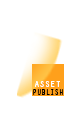
<style>
.page{position:relative;width:64px;height:128px;background:#ffffff}
.page>*{position:absolute;margin:0}
.t1{font:8px "OratorStd";letter-spacing:-0.05em;color:#000000}
.t2{font:9px "OratorStd";color:#ffffff}
</style>
<div class="page">
<p class="t1" style="left:33px;top:89px;width:30px;height:6px">PUBLISH</p>
<p class="t2" style="left:35px;top:81px;width:25px;height:6px">ASSET</p>
</div>
